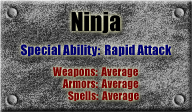
<style>
.page{position:relative;width:192px;height:112px}
.page>*{position:absolute;margin:0}
.t1{font:24px "Impact";color:#000000}
.t2{font:13px "Impact";color:#00006d}
.t3{font:11px "Impact";color:#750000}
</style>
<div class="page">
<p class="t1" style="left:71px;top:12px;width:50px;height:22px">Ninja</p>
<p class="t2" style="left:21px;top:44px;width:151px;height:13px">Special Ability:  Rapid Attack</p>
<p class="t3" style="left:53px;top:67px;width:85px;height:11px">Weapons:  Average</p>
<p class="t3" style="left:62px;top:79px;width:77px;height:11px">Armors:  Average</p>
<p class="t3" style="left:68px;top:91px;width:71px;height:11px">Spells:  Average</p>
</div>
